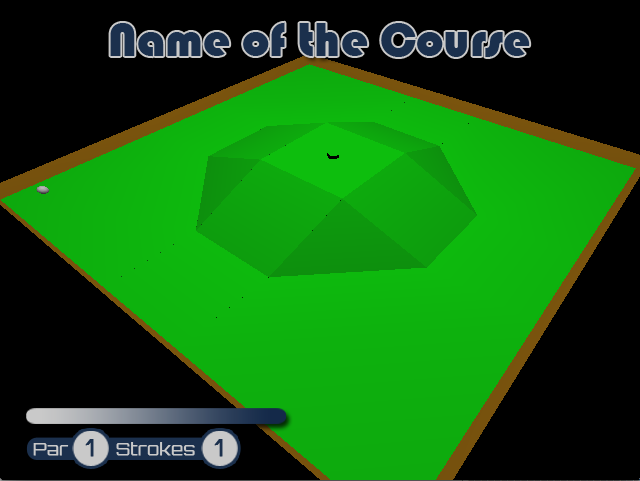
<style>
.page{position:relative;width:640px;height:481px;background:#000000}
.page>*{position:absolute;margin:0}
.t1{font:17.2px "Orbitron-Light";color:#c9c9c9;font-weight:bold}
.t2{font:23px "Orbitron-Light";color:#1b304d;font-weight:bold}
</style>
<div class="page">
<p class="t1" style="left:33px;top:443px;width:36px;height:13px">Par</p>
<p class="t2" style="left:85px;top:439px;width:9px;height:18px">1</p>
<p class="t1" style="left:116px;top:442px;width:79px;height:14px">Strokes</p>
<p class="t2" style="left:214px;top:439px;width:9px;height:18px">1</p>
</div>
